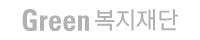
<style>
.page{position:relative;width:200px;height:40px;background:#ffffff}
.page>*{position:absolute;margin:0}
.t1{font:30px "Univeconbol";color:#b2b2b2;scale:0.95 1}
.t2{font:24px "THELuxGoM";color:#b2b2b2;scale:0.95 1}
</style>
<div class="page">
<p class="t1" style="left:22px;top:9px;width:156px;height:22px">Green <span class="t2">복지재단</span></p>
</div>
